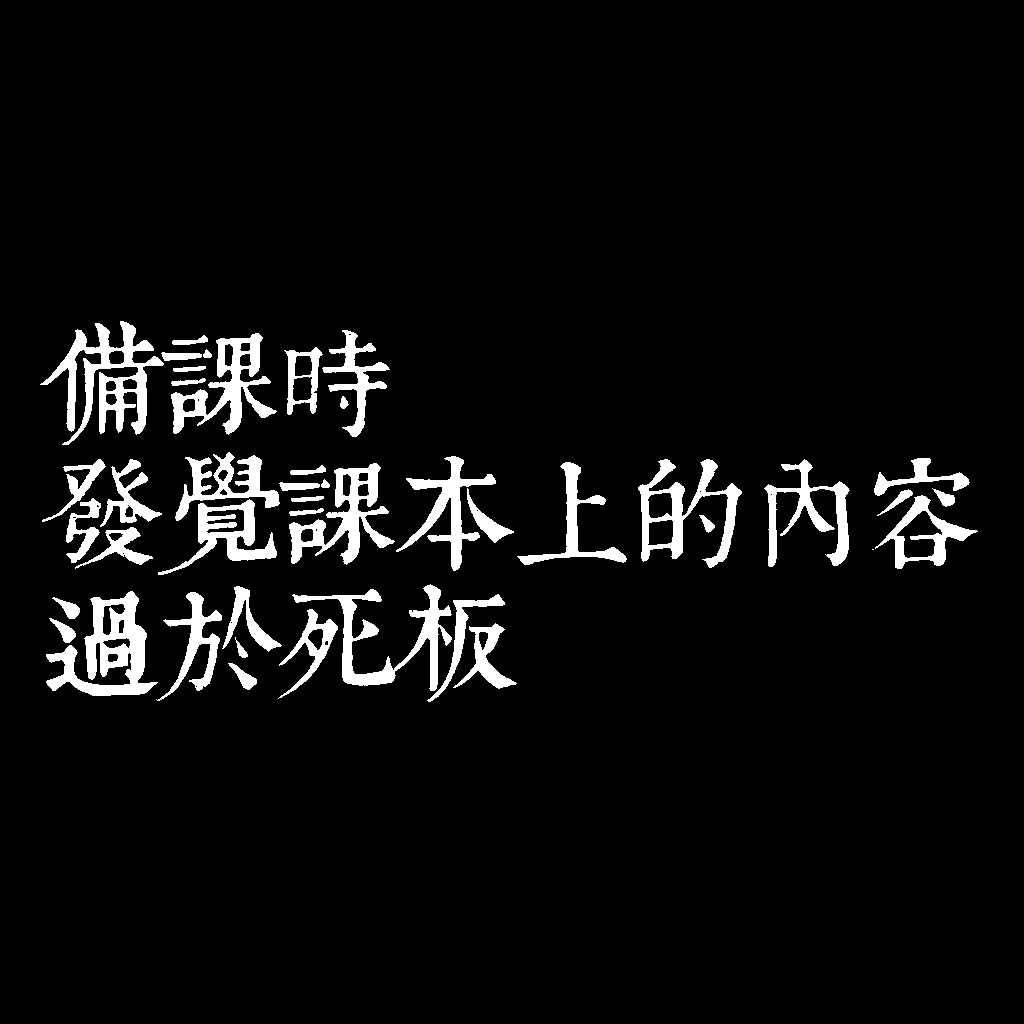
<style>
.page{position:relative;width:1024px;height:1024px;background:#000000}
.page>*{position:absolute;margin:0}
.t1{font:120px/130px "TpldKhangXiDictTrial";letter-spacing:-0.02em;color:#ffffff}
</style>
<div class="page">
<p class="t1" style="left:40px;top:321px;width:938px;height:381px">備課時<br>發覺課本上的內容<br>過於死板</p>
</div>
